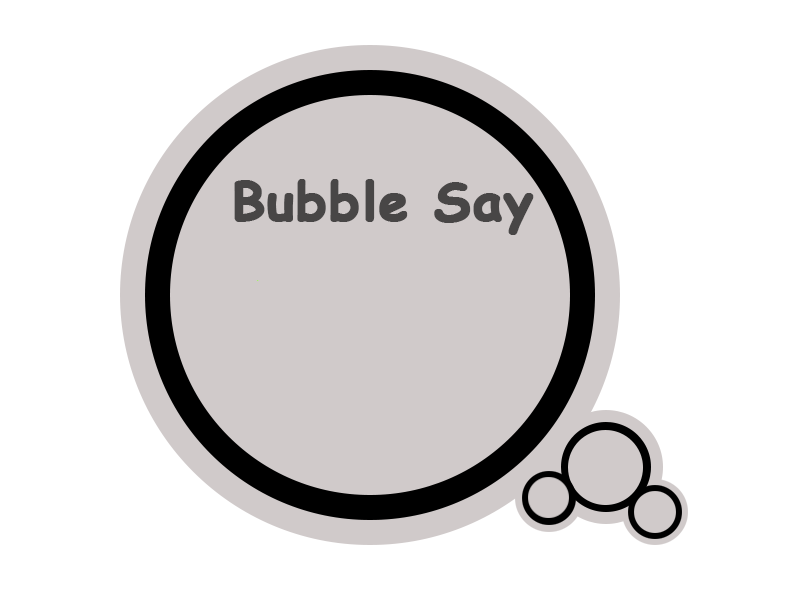
<style>
.page{position:relative;width:800px;height:600px;background:#ffffff}
.page>*{position:absolute;margin:0}
.t1{font:53.3px "ComicSansMS-Bold";color:#484646;font-weight:bold}
</style>
<div class="page">
<p class="t1" style="left:234px;top:179px;width:300px;height:56px">Bubble Say</p>
</div>
